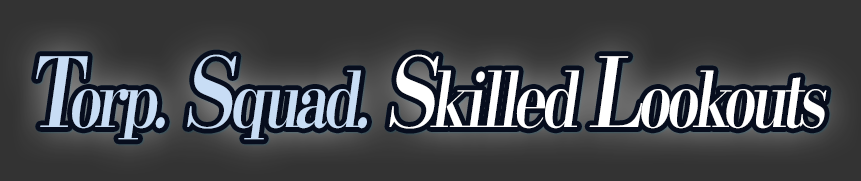
<style>
.page{position:relative;width:861px;height:181px;background:#333333}
.page>*{position:absolute;margin:0}
.t1{font:76.8px "KochoStd-Heavy";letter-spacing:-0.08em;color:#ffffff;font-style:italic;scale:0.79 1}
.t2{font:96px "KochoStd-Heavy";letter-spacing:-0.08em;color:#c8ddf5;font-style:italic;scale:0.79 1}
.t3{font:76.8px "KochoStd-Heavy";letter-spacing:-0.08em;color:#c8ddf5;font-style:italic;scale:0.79 1}
.t4{font:96px "KochoStd-Heavy";letter-spacing:-0.08em;color:#ffffff;font-style:italic;scale:0.79 1}
</style>
<div class="page">
<p class="t1" style="left:36px;top:54px;width:791px;height:86px"><span class="t2">T</span><span class="t3">orp.</span><span class="t2"> S</span><span class="t3">quad.</span><span class="t4"> S</span>killed <span class="t4">L</span>ookouts</p>
</div>
